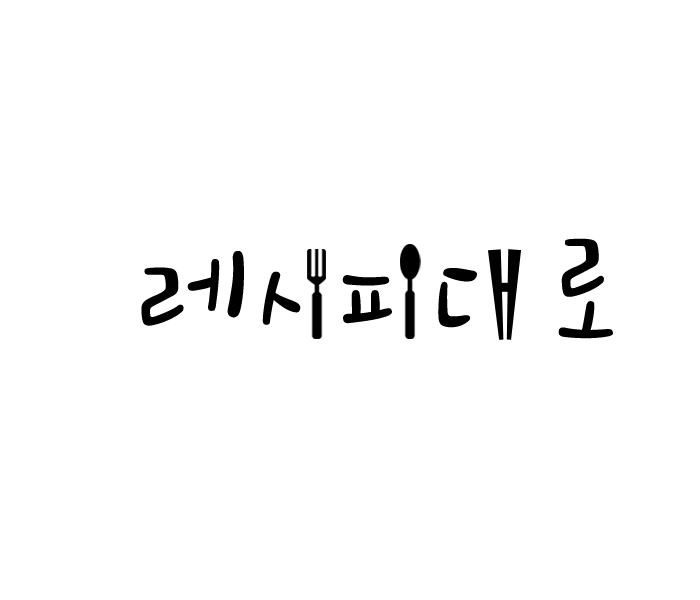
<style>
.page{position:relative;width:700px;height:600px;background:#ffffff}
.page>*{position:absolute;margin:0}
.t1{font:160px "TTOjunohwhooR";color:#000000}
</style>
<div class="page">
<p class="t1" style="left:141px;top:238px;width:472px;height:102px">레시피대로</p>
</div>
